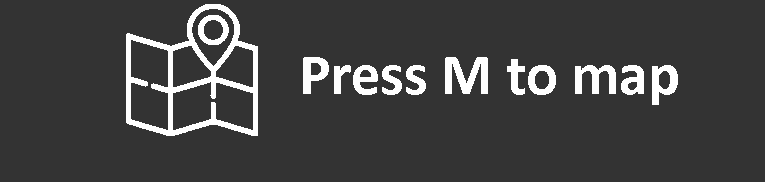
<style>
.page{position:relative;width:765px;height:182px;background:#333333}
.page>*{position:absolute;margin:0}
.t1{font:59px "Calibri-Bold";color:#ffffff}
</style>
<div class="page">
<p class="t1" style="left:303px;top:57px;width:375px;height:48px">Press M to map</p>
</div>
